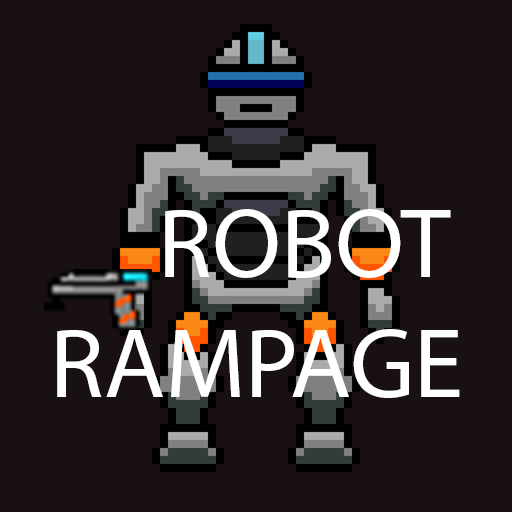
<style>
.page{position:relative;width:512px;height:512px;background:#191111}
.page>*{position:absolute;margin:0}
.t1{font:100px "MyriadPro-Regular";color:#ffffff}
</style>
<div class="page">
<p class="t1" style="left:57px;top:209px;width:403px;height:189px">ROBOT<br>RAMPAGE</p>
</div>
